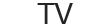
<style>
.page{position:relative;width:109px;height:28px;background:#ffffff}
.page>*{position:absolute;margin:0}
.t1{font:30px "HelveticaNeue";color:#242424}
</style>
<div class="page">
<p class="t1" style="left:37px;top:3px;width:36px;height:21px">TV</p>
</div>
